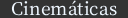
<style>
.page{position:relative;width:128px;height:18px;background:#333333}
.page>*{position:absolute;margin:0}
.t1{font:21px "OfficialFateFont-Medium";color:#eff7ff}
</style>
<div class="page">
<p class="t1" style="left:11px;top:0px;width:106px;height:16px">Cinemáticas</p>
</div>
